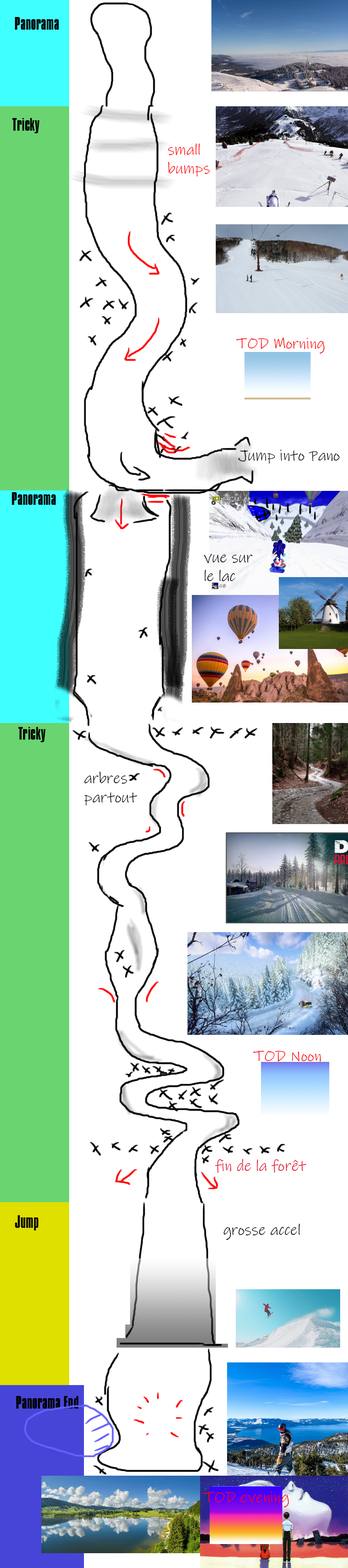
<style>
.page{position:relative;width:348px;height:1568px;background:#ffffff}
.page>*{position:absolute;margin:0}
.t1{font:15.7px "Compacta";color:#000000}
.t2{font:15.7px "InkFree";color:#ff0000}
.t3{font:15.7px "InkFree";color:#000000}
.t4{font:15.7px "InkFree";color:#df002a}
</style>
<div class="page">
<p class="t1" style="left:15px;top:17px;width:44px;height:13px">Panorama</p>
<p class="t1" style="left:12px;top:118px;width:28px;height:15px">Tricky</p>
<p class="t2" style="left:168px;top:143px;width:42px;height:34px">small<br>bumps</p>
<p class="t2" style="left:237px;top:338px;width:88px;height:16px">TOD Morning</p>
<p class="t3" style="left:238px;top:449px;width:102px;height:15px">Jump into Pano</p>
<p class="t1" style="left:12px;top:492px;width:44px;height:13px">Panorama</p>
<p class="t3" style="left:204px;top:554px;width:49px;height:27px">vue sur<br>le lac</p>
<p class="t1" style="left:18px;top:727px;width:28px;height:15px">Tricky</p>
<p class="t3" style="left:84px;top:771px;width:53px;height:35px">arbres<br>partout</p>
<p class="t2" style="left:253px;top:1050px;width:68px;height:12px">TOD Noon</p>
<p class="t4" style="left:215px;top:1159px;width:92px;height:14px">fin de la forêt</p>
<p class="t1" style="left:15px;top:1215px;width:24px;height:15px">Jump</p>
<p class="t3" style="left:224px;top:1223px;width:77px;height:17px">grosse accel</p>
<p class="t1" style="left:16px;top:1396px;width:62px;height:13px">Panorama End</p>
<p class="t2" style="left:203px;top:1491px;width:86px;height:16px">TOD evening</p>
</div>
